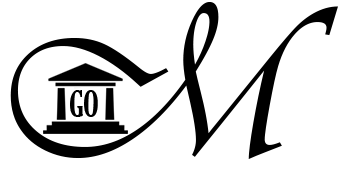
<style>
.page{position:relative;width:354px;height:177px;background:#ffffff}
.page>*{position:absolute;margin:0}
.t1{font:224.4px "Vivaldii";color:#000000}
.t2{font:35.4px "GloucesterMT-ExtraCondensed";color:#000000;text-transform:uppercase}
</style>
<div class="page">
<p class="t1" style="left:10px;top:2px;width:328px;height:157px">M</p>
<p class="t2" style="left:70px;top:90px;width:28px;height:27px">go</p>
</div>
